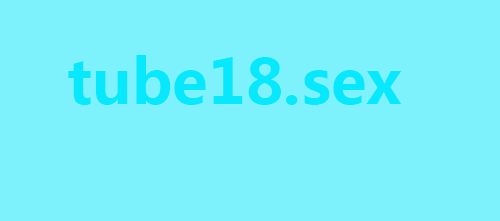
<style>
.page{position:relative;width:500px;height:221px;background:#7ef2fc}
.page>*{position:absolute;margin:0}
.t1{font:61px "MicrosoftYaHei-Bold";color:#07e8fd}
</style>
<div class="page">
<p class="t1" style="left:68px;top:55px;width:334px;height:50px">tube18.sex</p>
</div>
